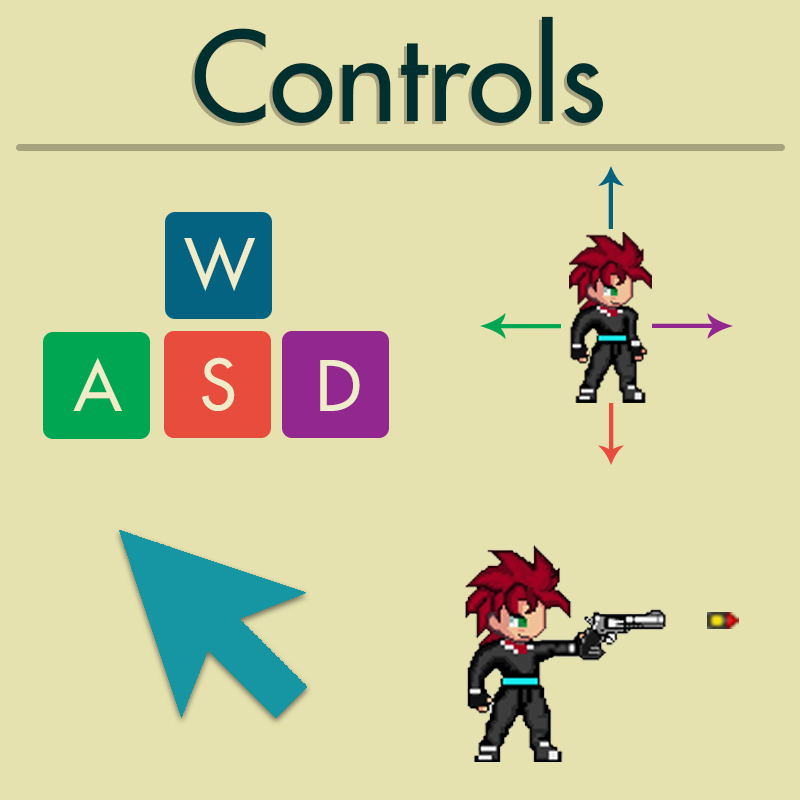
<style>
.page{position:relative;width:800px;height:800px;background:#e6e2af}
.page>*{position:absolute;margin:0}
.t1{font:120px "FuturaLT";color:#002f2f}
.t2{font:67.8px "FuturaLT";color:#efecca}
</style>
<div class="page">
<p class="t1" style="left:194px;top:16px;width:409px;height:107px">Controls</p>
<p class="t1" style="left:191px;top:19px;width:409px;height:107px">Controls</p>
<p class="t2" style="left:184px;top:237px;width:71px;height:54px">W</p>
<p class="t2" style="left:73px;top:358px;width:49px;height:53px">A</p>
<p class="t2" style="left:202px;top:357px;width:33px;height:54px">S</p>
<p class="t2" style="left:320px;top:360px;width:40px;height:51px">D</p>
</div>
